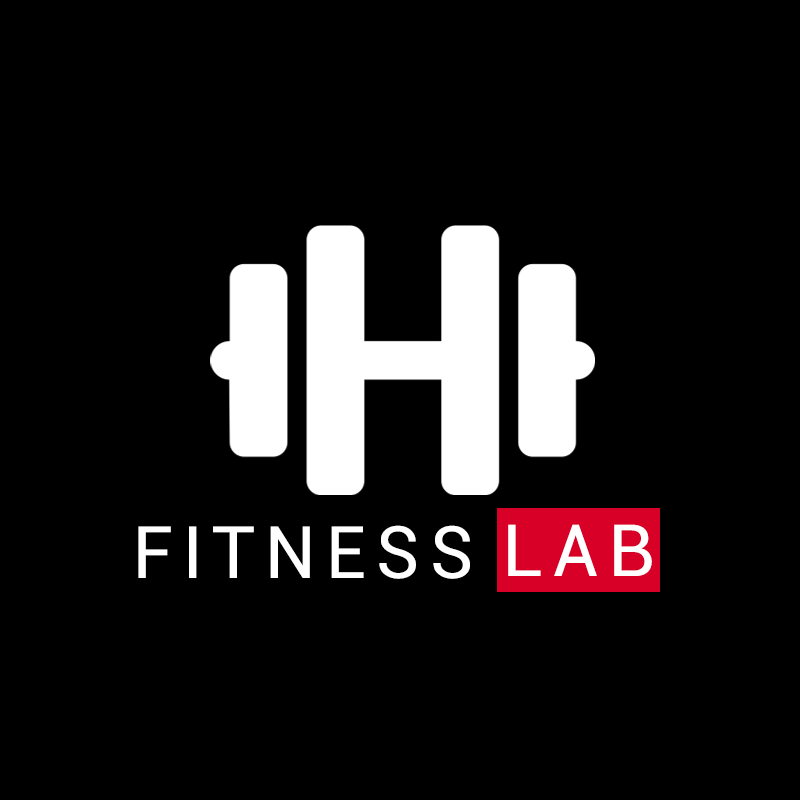
<style>
.page{position:relative;width:800px;height:800px;background:#000000}
.page>*{position:absolute;margin:0}
.t1{font:72px "Roboto-Regular";letter-spacing:0.14em;color:#ffffff}
.t2{font:72.1px "Roboto-Regular";letter-spacing:0.14em;color:#ffffff}
</style>
<div class="page">
<p class="t1" style="left:138px;top:525px;width:332px;height:54px">FITNESS</p>
<p class="t2" style="left:508px;top:524px;width:144px;height:52px">LAB</p>
</div>
